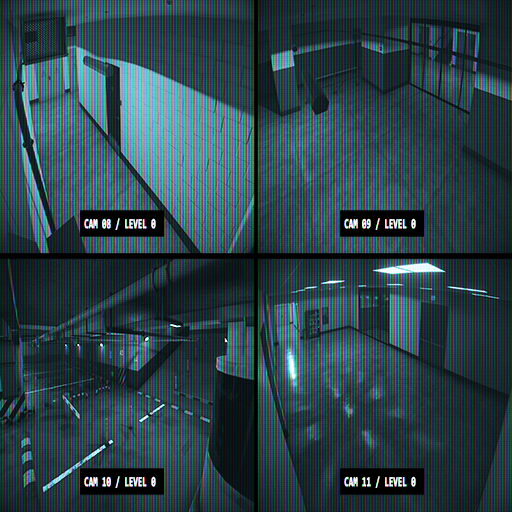
<style>
.page{position:relative;width:512px;height:512px}
.page>*{position:absolute;margin:0}
.t1{font:13.7px "Consolas-Bold";color:#ffffff;font-weight:bold;scale:0.56 1}
</style>
<div class="page">
<p class="t1" style="left:84px;top:218px;width:72px;height:12px">CAM 08 / LEVEL 0</p>
<p class="t1" style="left:344px;top:218px;width:72px;height:12px">CAM 09 / LEVEL 0</p>
<p class="t1" style="left:84px;top:476px;width:72px;height:12px">CAM 10 / LEVEL 0</p>
<p class="t1" style="left:344px;top:476px;width:72px;height:12px">CAM 11 / LEVEL 0</p>
</div>
